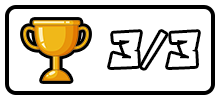
<style>
.page{position:relative;width:220px;height:100px;background:#ffffff}
.page>*{position:absolute;margin:0}
.t1{font:50px "SUPERGAME";color:#ffffff}
</style>
<div class="page">
<p class="t1" style="left:110px;top:32px;width:88px;height:36px">3/3</p>
</div>
